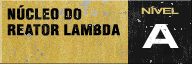
<style>
.page{position:relative;width:192px;height:64px}
.page>*{position:absolute;margin:0}
.t1{font:14.6px/15.8px "HelveticaLT-Condensed-Black";letter-spacing:0.03em;color:#000000;scale:1.07 1}
.t2{font:8px "Helvetica";letter-spacing:-0.08em;color:#dec673;text-transform:uppercase;font-weight:bold;scale:1.75 1}
</style>
<div class="page">
<p class="t1" style="left:7px;top:5px;width:113px;height:31px">NÚCLEO DO<br>REATOR LAMBDA</p>
<p class="t2" style="left:141px;top:6px;width:38px;height:8px">NÍVEL</p>
</div>
